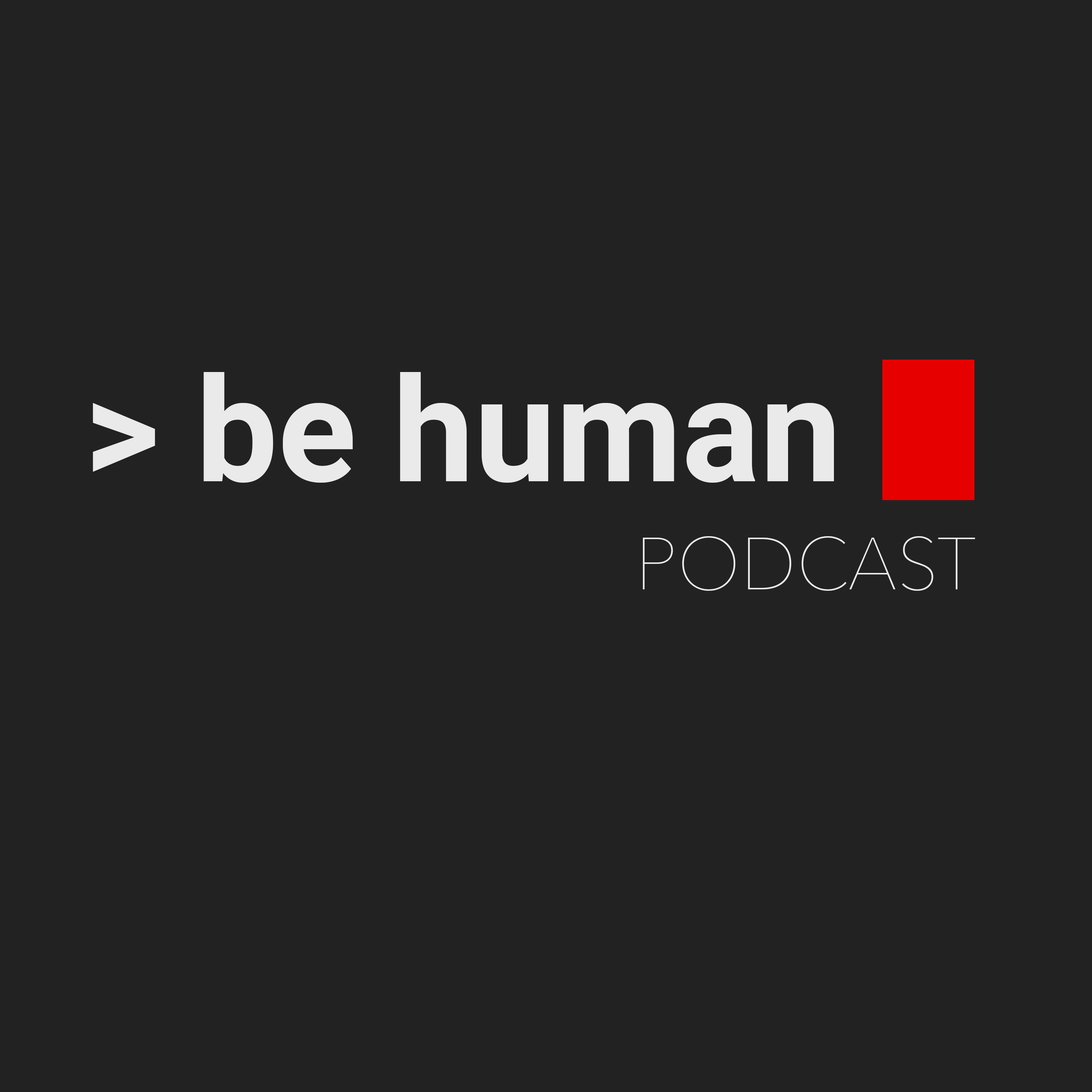
<style>
.page{position:relative;width:1092px;height:1092px;background:#222222}
.page>*{position:absolute;margin:0}
.t1{font:145.6px "Roboto-Bold";color:#eaeaea}
.t2{font:72.8px "AvenirNext-UltraLight";color:#eaeaea}
</style>
<div class="page">
<p class="t1" style="left:93px;top:372px;width:741px;height:111px">&gt; be human</p>
<p class="t2" style="left:643px;top:536px;width:332px;height:55px">PODCAST</p>
</div>
